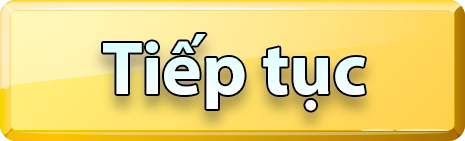
<style>
.page{position:relative;width:465px;height:141px}
.page>*{position:absolute;margin:0}
.t1{font:75px "MyriadPro-Bold";color:#ffffff}
</style>
<div class="page">
<p class="t1" style="left:103px;top:34px;width:262px;height:77px">Tiếp tục</p>
</div>
